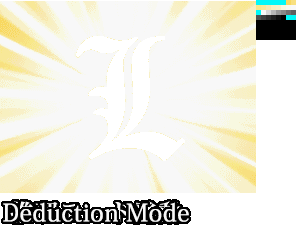
<style>
.page{position:relative;width:296px;height:225px;background:#f8f8f8}
.page>*{position:absolute;margin:0}
.t1{font:24px "KozMinPro-Medium";letter-spacing:0.025em;color:#f8f8f8}
</style>
<div class="page">
<p class="t1" style="left:3px;top:202px;width:186px;height:20px">Deduction Mode</p>
</div>
